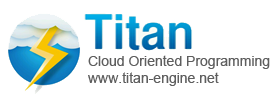
<style>
.page{position:relative;width:276px;height:96px;background:#ffffff}
.page>*{position:absolute;margin:0}
.t1{font:14px "ArialMT";color:#5e5e5e}
</style>
<div class="page">
<p class="t1" style="left:88px;top:55px;width:182px;height:14px">Cloud Oriented Programming</p>
<p class="t1" style="left:88px;top:72px;width:131px;height:14px">www.titan-engine.net</p>
</div>
